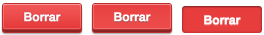
<style>
.page{position:relative;width:264px;height:35px}
.page>*{position:absolute;margin:0}
.t1{font:12px "HelveticaNeue-Medium";color:#f7fbff;font-weight:bold}
.t2{font:12px "HelveticaNeue-Medium";color:#ffffff;font-weight:bold}
</style>
<div class="page">
<p class="t1" style="left:24px;top:12px;width:37px;height:10px">Borrar</p>
<p class="t2" style="left:114px;top:12px;width:37px;height:10px">Borrar</p>
<p class="t2" style="left:204px;top:15px;width:37px;height:10px">Borrar</p>
</div>
